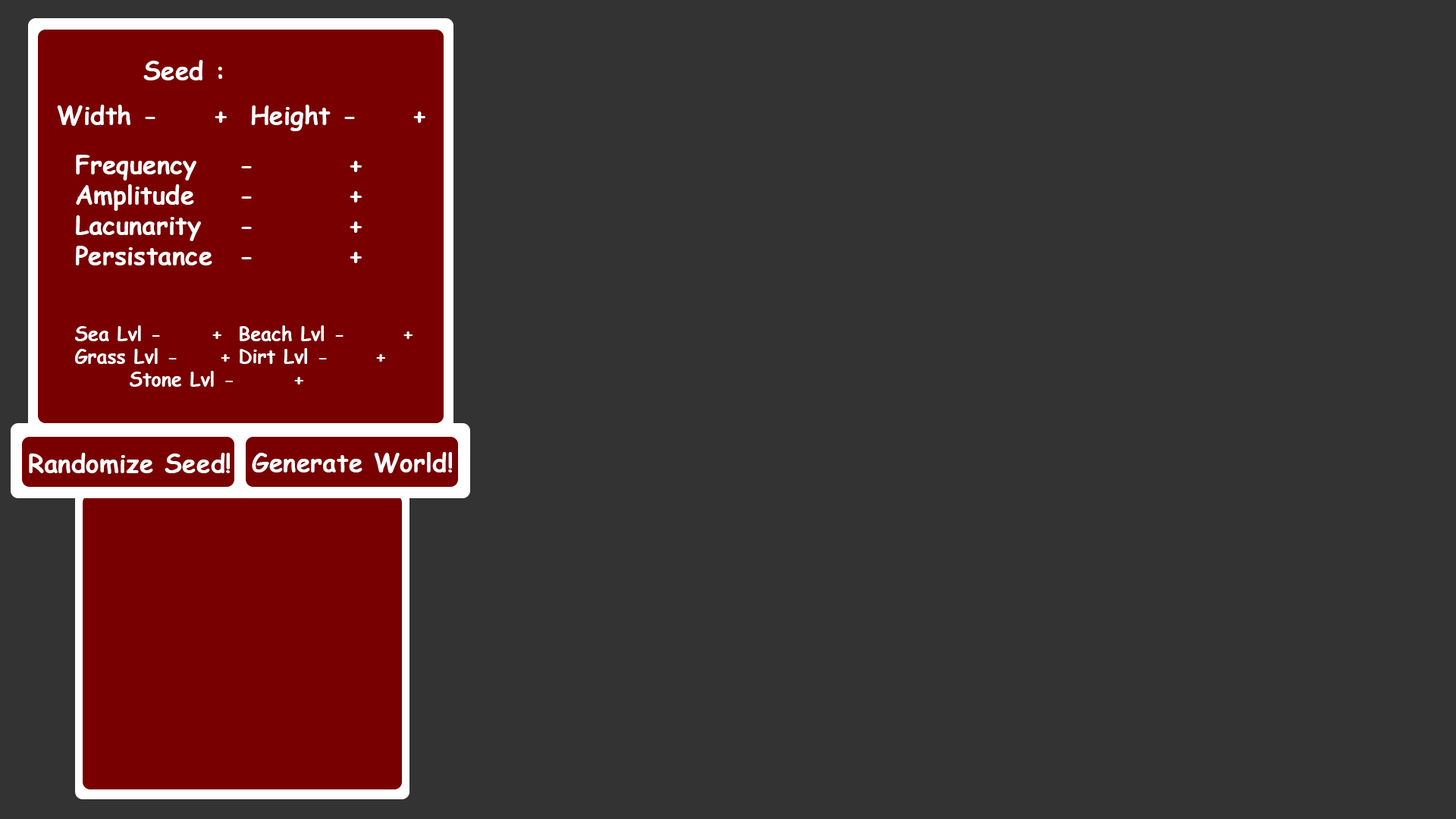
<style>
.page{position:relative;width:1456px;height:819px;background:#333333}
.page>*{position:absolute;margin:0}
.t1{font:25.3px "ComicSansMS-Bold";color:#ffffff}
.t2{font:19px "ComicSansMS-Bold";color:#ffffff}
</style>
<div class="page">
<p class="t1" style="left:143px;top:60px;width:79px;height:20px">Seed :</p>
<p class="t1" style="left:57px;top:105px;width:368px;height:26px">Width -     +  Height -     +</p>
<p class="t2" style="left:75px;top:155px;width:338px;height:232px"><span class="t1">Frequency  -    + <br>Amplitude  -    + <br>Lacunarity  -    + <br>Persistance -    + <br><br></span><br>Sea Lvl -      + Beach Lvl -      +<br>Grass Lvl -     + Dirt Lvl -      +<br>  Stone Lvl -      +</p>
<p class="t1" style="left:29px;top:453px;width:201px;height:21px">Randomize Seed!</p>
<p class="t1" style="left:252px;top:452px;width:200px;height:21px">Generate World!</p>
</div>
